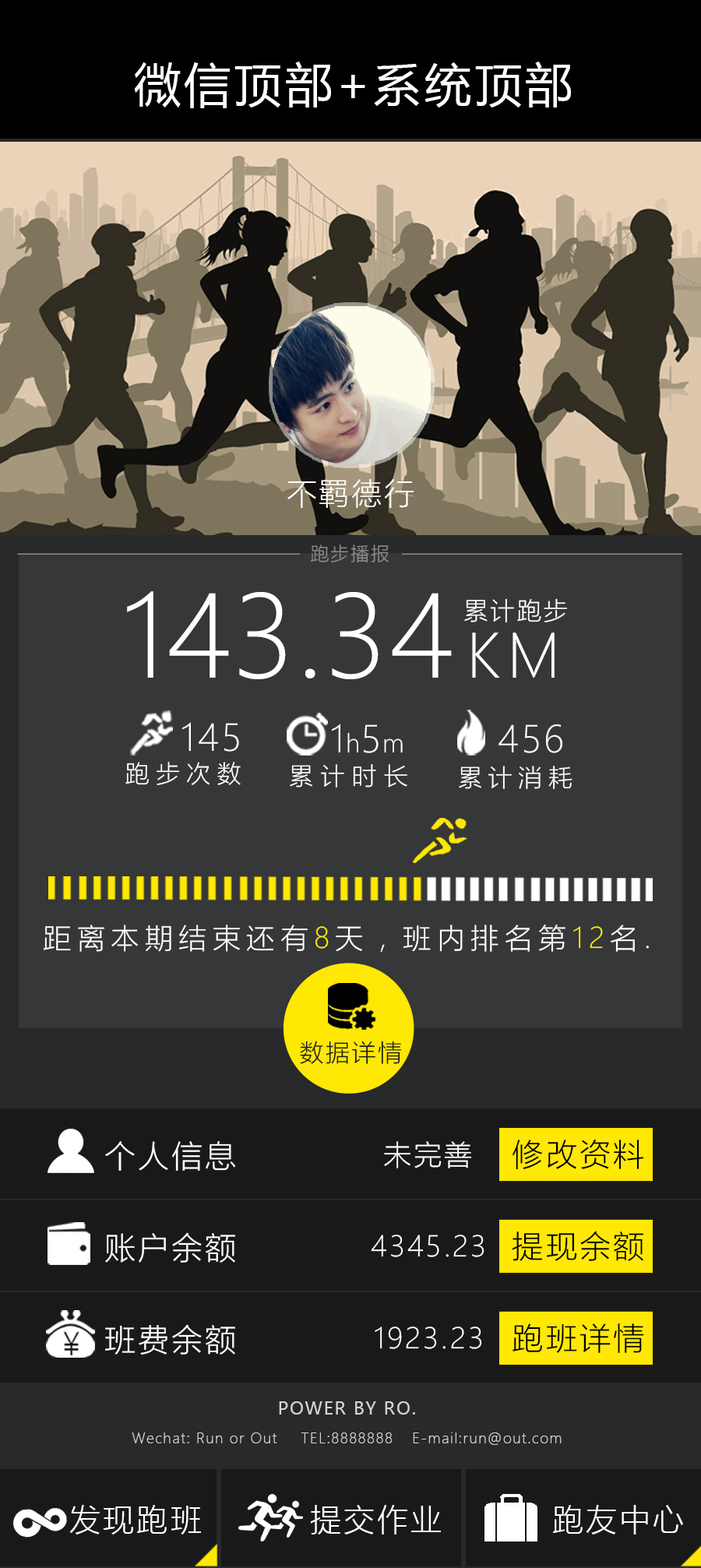
<style>
.page{position:relative;width:701px;height:1568px;background:#353738}
.page>*{position:absolute;margin:0}
.t1{font:46.7px "MicrosoftYaHei";letter-spacing:0.08em;color:#ffffff}
.t2{font:30.1px "MicrosoftYaHeiLight";letter-spacing:0.08em;color:#ffffff}
.t3{font:18.8px "MicrosoftYaHeiLight";letter-spacing:0.08em;color:#8d8d8d}
.t4{font:111.6px "MicrosoftYaHeiLight";letter-spacing:0.02em;color:#ffffff}
.t5{font:59.5px "MicrosoftYaHeiLight";letter-spacing:0.12em;color:#ffffff}
.t6{font:24.8px "MicrosoftYaHeiLight";letter-spacing:0.08em;color:#ffffff}
.t7{font:36.4px "MicrosoftYaHeiLight";letter-spacing:0.08em;color:#ffffff}
.t8{font:36.4px "MicrosoftYaHeiLight";letter-spacing:0.04em;color:#ffffff}
.t9{font:24.2px "MicrosoftYaHeiLight";letter-spacing:0.04em;color:#ffffff}
.t10{font:36.4px "MicrosoftYaHeiLight";letter-spacing:0.06em;color:#ffffff}
.t11{font:24.2px "MicrosoftYaHeiLight";letter-spacing:0.26em;color:#ffffff}
.t12{font:24.2px "MicrosoftYaHeiLight";letter-spacing:0.3em;color:#ffffff}
.t13{font:24.2px "MicrosoftYaHeiLight";letter-spacing:0.24em;color:#ffffff}
.t14{font:28.1px "MicrosoftYaHeiLight";letter-spacing:0.2em;color:#ffffff}
.t15{font:28.1px "MicrosoftYaHeiLight";letter-spacing:0.2em;color:#fee804}
.t16{font:24px "MicrosoftYaHeiLight";letter-spacing:0.08em;color:#191919}
.t17{font:31.2px "MicrosoftYaHeiLight";letter-spacing:0.08em;color:#ffffff}
.t18{font:28px "MicrosoftYaHeiLight";letter-spacing:0.08em;color:#ffffff}
.t19{font:31.1px "MicrosoftYaHeiLight";letter-spacing:0.08em;color:#000000}
.t20{font:14px/31.9px "MicrosoftYaHeiLight";letter-spacing:0.08em;color:#d4d4d4}
.t21{font:17.1px/31.9px "MicrosoftYaHei";letter-spacing:0.08em;color:#d4d4d4}
</style>
<div class="page">
<p class="t1" style="left:134px;top:62px;width:437px;height:46px">微信顶部+系统顶部</p>
<p class="t2" style="left:287px;top:479px;width:127px;height:29px">不羁德行</p>
<p class="t3" style="left:311px;top:544px;width:78px;height:19px">跑步播报</p>
<p class="t4" style="left:127px;top:591px;width:428px;height:88px">143.34 <span class="t5">KM</span></p>
<p class="t6" style="left:464px;top:598px;width:103px;height:25px">累计跑步</p>
<p class="t7" style="left:182px;top:722px;width:57px;height:30px">145</p>
<p class="t8" style="left:332px;top:724px;width:71px;height:29px">1<span class="t9">h</span>5<span class="t9">m</span></p>
<p class="t10" style="left:499px;top:724px;width:63px;height:29px">456</p>
<p class="t11" style="left:125px;top:762px;width:116px;height:23px">跑步次数</p>
<p class="t12" style="left:290px;top:764px;width:117px;height:24px">累计时长</p>
<p class="t13" style="left:459px;top:766px;width:114px;height:23px">累计消耗</p>
<p class="t14" style="left:43px;top:925px;width:606px;height:27px">距离本期结束还有<span class="t15">8</span>天，班内排名第<span class="t15">12</span>名.</p>
<p class="t16" style="left:300px;top:1041px;width:102px;height:23px">数据详情</p>
<p class="t17" style="left:105px;top:1141px;width:131px;height:30px">个人信息</p>
<p class="t18" style="left:384px;top:1141px;width:88px;height:27px">未完善</p>
<p class="t19" style="left:513px;top:1140px;width:131px;height:30px">修改资料</p>
<p class="t17" style="left:105px;top:1232px;width:130px;height:31px">账户余额</p>
<p class="t18" style="left:371px;top:1235px;width:113px;height:22px">4345.23</p>
<p class="t19" style="left:512px;top:1231px;width:132px;height:30px">提现余额</p>
<p class="t17" style="left:105px;top:1324px;width:130px;height:31px">班费余额</p>
<p class="t19" style="left:513px;top:1323px;width:131px;height:30px">跑班详情</p>
<p class="t18" style="left:375px;top:1327px;width:107px;height:22px">1923.23</p>
<p class="t20" style="left:132px;top:1401px;width:430px;height:44px;text-align:center"><span class="t21">POWER BY RO.<br></span>Wechat: Run or Out TEL:8888888 E-mail:run@out.com</p>
<p class="t17" style="left:69px;top:1505px;width:132px;height:30px">发现跑班</p>
<p class="t17" style="left:310px;top:1505px;width:131px;height:30px">提交作业</p>
<p class="t17" style="left:553px;top:1505px;width:130px;height:30px">跑友中心</p>
</div>
